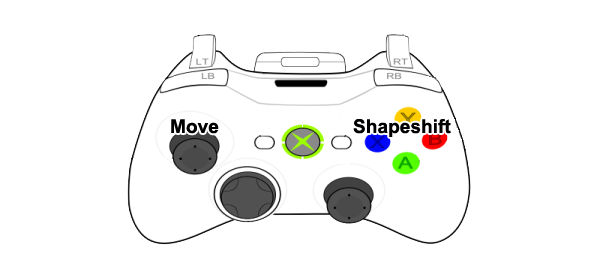
<style>
.page{position:relative;width:600px;height:278px;background:#ffffff}
.page>*{position:absolute;margin:0}
.t1{font:19.1px "Arial-BoldMT";color:#000000}
</style>
<div class="page">
<p class="t1" style="left:171px;top:119px;width:48px;height:15px">Move</p>
<p class="t1" style="left:353px;top:119px;width:98px;height:18px">Shapeshift</p>
</div>
